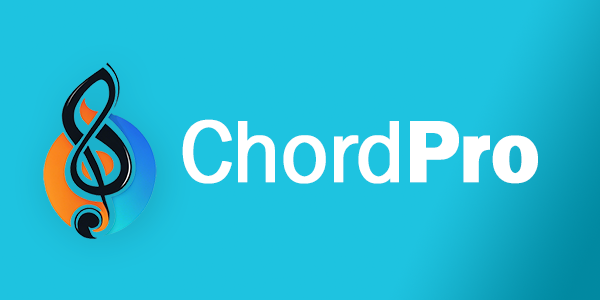
<style>
.page{position:relative;width:600px;height:300px;background:#1ec3e0}
.page>*{position:absolute;margin:0}
.t1{font:90px "FranklinGothic-Book";letter-spacing:-0.025em;color:#ffffff;font-weight:bold}
.t2{font:90px "FranklinGothic-Demi";letter-spacing:-0.025em;color:#ffffff;font-weight:bold}
</style>
<div class="page">
<p class="t1" style="left:182px;top:119px;width:356px;height:65px">Chord<span class="t2">Pro</span></p>
</div>
